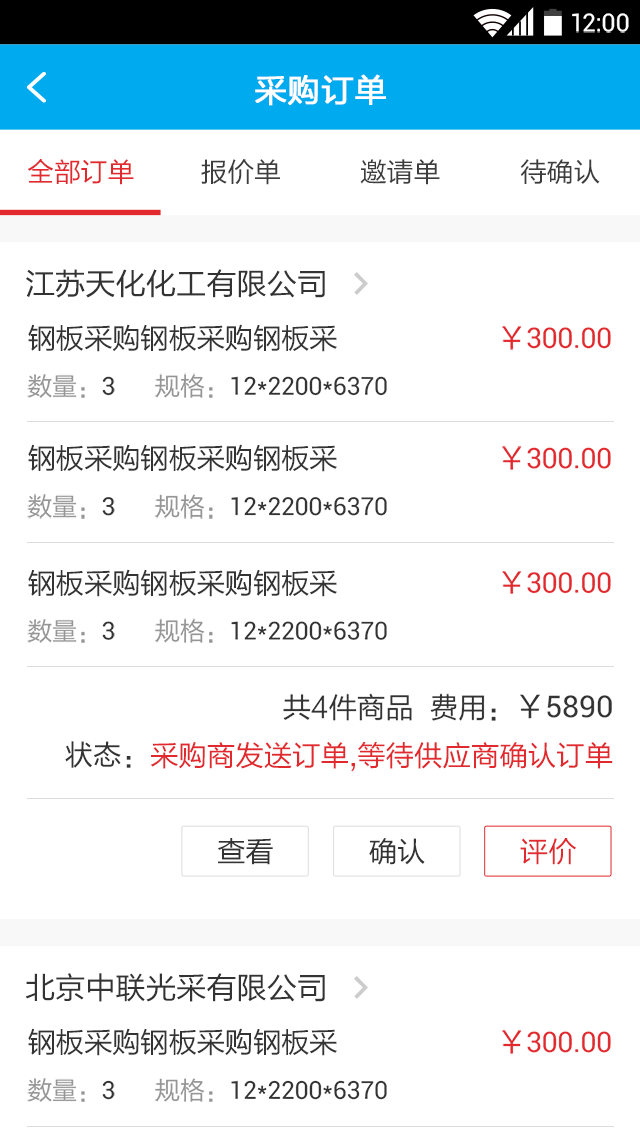
<style>
.page{position:relative;width:640px;height:1138px;background:#ffffff}
.page>*{position:absolute;margin:0}
.t1{font:24.9px "Roboto-Regular";color:#ffffff}
.t2{font:32px "FZLTHJW--GB1-0";letter-spacing:0.02em;color:#ffffff;font-weight:bold}
.t3{font:26.7px "FZLTHJW--GB1-0";color:#e1292e}
.t4{font:26.7px "FZLTHJW--GB1-0";color:#3d3d3d}
.t5{font:30.2px "FZLTHJW--GB1-0";color:#333333}
.t6{font:28.4px "FZLTHJW--GB1-0";letter-spacing:-0.01em;color:#333333;text-transform:uppercase}
.t7{font:28.4px "Roboto-Regular";letter-spacing:-0.01em;color:#e1292e;text-transform:uppercase}
.t8{font:28.4px "FZLTHJW--GB1-0";letter-spacing:-0.01em;color:#e1292e;text-transform:uppercase}
.t9{font:24.9px "FZLTHJW--GB1-0";letter-spacing:-0.01em;color:#969696;text-transform:uppercase}
.t10{font:24.9px "Roboto-Regular";letter-spacing:-0.01em;color:#333333;text-transform:uppercase}
.t11{font:28.4px "FZLTHJW--GB1-0";color:#333333}
.t12{font:30.2px "Roboto-Regular";color:#333333}
.t13{font:28.4px "FZLTHJW--GB1-0";color:#e1292e}
</style>
<div class="page">
<p class="t1" style="left:572px;top:13px;width:57px;height:20px">12:00</p>
<p class="t2" style="left:255px;top:74px;width:131px;height:32px">采购订单</p>
<p class="t3" style="left:28px;top:159px;width:106px;height:26px">全部订单</p>
<p class="t4" style="left:201px;top:159px;width:79px;height:26px">报价单</p>
<p class="t4" style="left:360px;top:159px;width:80px;height:26px">邀请单</p>
<p class="t4" style="left:520px;top:159px;width:80px;height:25px">待确认</p>
<p class="t5" style="left:26px;top:269px;width:299px;height:29px">江苏天化化工有限公司</p>
<p class="t6" style="left:28px;top:324px;width:309px;height:28px">钢板采购钢板采购钢板采</p>
<p class="t7" style="left:502px;top:326px;width:109px;height:24px"><span class="t8">￥</span>300.00</p>
<p class="t9" style="left:27px;top:374px;width:88px;height:24px">数量：<span class="t10">3</span></p>
<p class="t10" style="left:155px;top:373px;width:232px;height:25px"><span class="t9">规格：</span>12*2200*6370</p>
<p class="t6" style="left:28px;top:444px;width:309px;height:28px">钢板采购钢板采购钢板采</p>
<p class="t7" style="left:502px;top:446px;width:109px;height:24px"><span class="t8">￥</span>300.00</p>
<p class="t9" style="left:27px;top:494px;width:88px;height:25px">数量：<span class="t10">3</span></p>
<p class="t10" style="left:155px;top:494px;width:232px;height:25px"><span class="t9">规格：</span>12*2200*6370</p>
<p class="t6" style="left:28px;top:569px;width:309px;height:28px">钢板采购钢板采购钢板采</p>
<p class="t7" style="left:502px;top:571px;width:109px;height:23px"><span class="t8">￥</span>300.00</p>
<p class="t9" style="left:27px;top:619px;width:88px;height:24px">数量：<span class="t10">3</span></p>
<p class="t10" style="left:155px;top:618px;width:232px;height:25px"><span class="t9">规格：</span>12*2200*6370</p>
<p class="t11" style="left:283px;top:693px;width:329px;height:28px">共4件商品  费用：<span class="t5">￥</span><span class="t12">5890</span></p>
<p class="t11" style="left:65px;top:741px;width:66px;height:27px">状态：</p>
<p class="t13" style="left:151px;top:741px;width:462px;height:31px">采购商发送订单,等待供应商确认订单</p>
<p class="t11" style="left:218px;top:838px;width:55px;height:27px">查看</p>
<p class="t11" style="left:369px;top:838px;width:56px;height:27px">确认</p>
<p class="t13" style="left:520px;top:838px;width:56px;height:27px">评价</p>
<p class="t5" style="left:26px;top:973px;width:299px;height:29px">北京中联光采有限公司</p>
<p class="t6" style="left:28px;top:1028px;width:309px;height:28px">钢板采购钢板采购钢板采</p>
<p class="t7" style="left:502px;top:1030px;width:109px;height:24px"><span class="t8">￥</span>300.00</p>
<p class="t9" style="left:27px;top:1078px;width:88px;height:24px">数量：<span class="t10">3</span></p>
<p class="t10" style="left:155px;top:1078px;width:232px;height:24px"><span class="t9">规格：</span>12*2200*6370</p>
</div>
